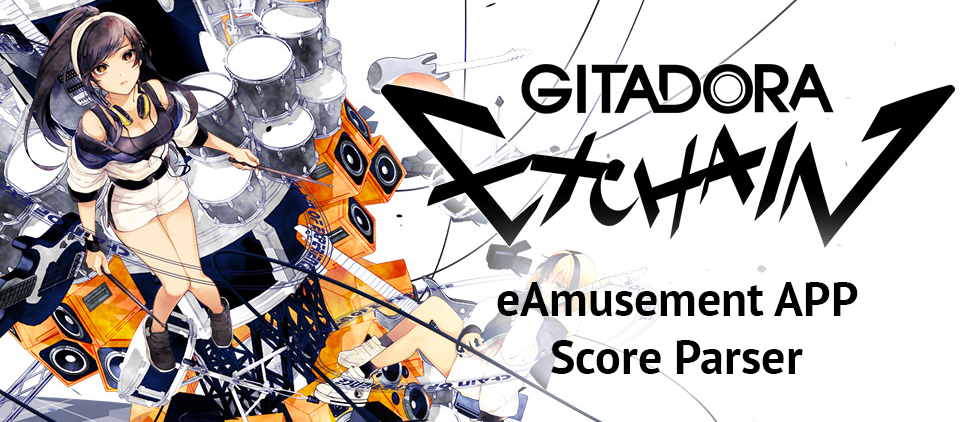
<style>
.page{position:relative;width:980px;height:422px;background:#ffffff}
.page>*{position:absolute;margin:0}
.t1{font:48px "PTSans-Bold";color:#000000}
</style>
<div class="page">
<p class="t1" style="left:497px;top:282px;width:361px;height:92px;text-align:center">eAmusement APP<br>Score Parser</p>
</div>
